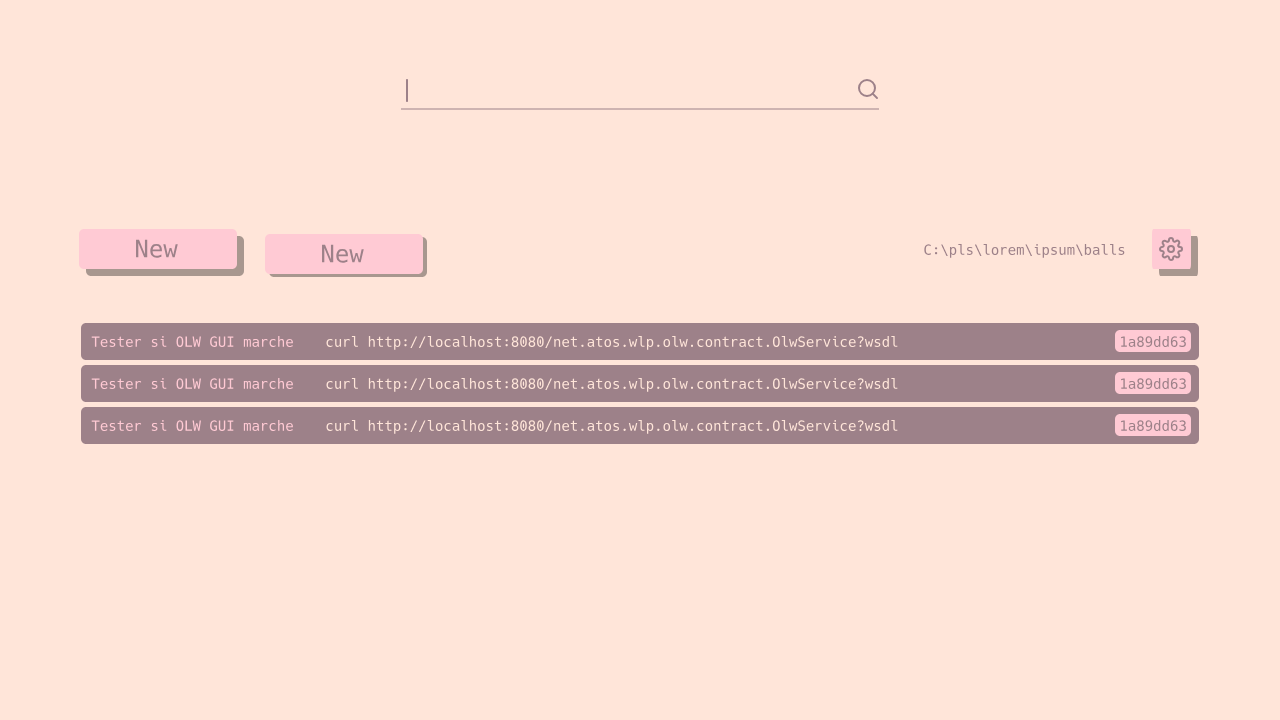
<style>
.page{position:relative;width:1280px;height:720px;background:#ffe5d9}
.page>*{position:absolute;margin:0}
.t1{font:24px "Hack-Regular";color:#9d8189}
.t2{font:14px "Hack-Regular";color:#9d8189}
.t3{font:14px "Hack-Regular";color:#ffcad4}
.t4{font:14px "Hack-Regular";color:#ffe5d9}
</style>
<div class="page">
<p class="t1" style="left:136px;top:239px;width:42px;height:19px">New</p>
<p class="t1" style="left:322px;top:244px;width:42px;height:19px">New</p>
<p class="t2" style="left:924px;top:244px;width:201px;height:14px">C:\pls\lorem\ipsum\balls</p>
<p class="t3" style="left:91px;top:336px;width:202px;height:11px">Tester si OLW GUI marche</p>
<p class="t4" style="left:326px;top:336px;width:572px;height:14px">curl http://localhost:8080/net.atos.wlp.olw.contract.OlwService?wsdl</p>
<p class="t2" style="left:1121px;top:336px;width:65px;height:11px">1a89dd63</p>
<p class="t3" style="left:91px;top:378px;width:202px;height:11px">Tester si OLW GUI marche</p>
<p class="t4" style="left:326px;top:378px;width:572px;height:14px">curl http://localhost:8080/net.atos.wlp.olw.contract.OlwService?wsdl</p>
<p class="t2" style="left:1121px;top:378px;width:65px;height:11px">1a89dd63</p>
<p class="t3" style="left:91px;top:420px;width:202px;height:11px">Tester si OLW GUI marche</p>
<p class="t4" style="left:326px;top:420px;width:572px;height:14px">curl http://localhost:8080/net.atos.wlp.olw.contract.OlwService?wsdl</p>
<p class="t2" style="left:1121px;top:420px;width:65px;height:11px">1a89dd63</p>
</div>
